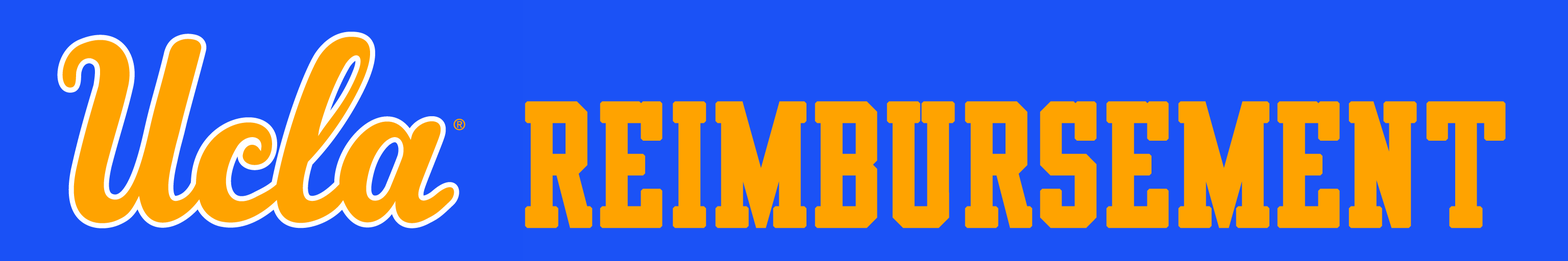
<style>
.page{position:relative;width:1568px;height:261px;background:#1b52f6}
.page>*{position:absolute;margin:0}
.t1{font:153.1px "BruinBlock-Condensed";letter-spacing:0.025em;color:#ffa300;font-weight:bold}
</style>
<div class="page">
<p class="t1" style="left:525px;top:101px;width:981px;height:128px">REIMBURSEMENT</p>
</div>
